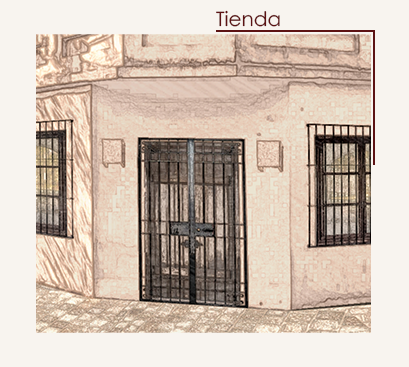
<style>
.page{position:relative;width:409px;height:367px;background:#f8f4ef}
.page>*{position:absolute;margin:0}
.t1{font:20px "CenturyGothic";color:#5c1213}
</style>
<div class="page">
<p class="t1" style="left:216px;top:10px;width:64px;height:17px">Tienda</p>
</div>
